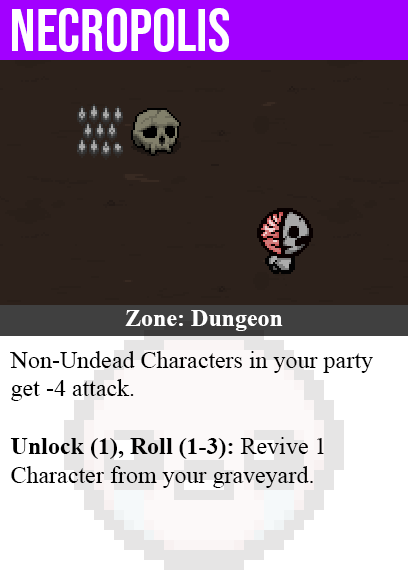
<style>
.page{position:relative;width:408px;height:585px;background:#2c211b}
.page>*{position:absolute;margin:0}
.t1{font:60px "BebasNeue-Regular";color:#ffffff}
.t2{font:24px "TimesNewRomanPS-BoldMT";color:#ffffff}
.t3{font:24px "TimesNewRomanPSMT";color:#000000}
.t4{font:24px "TimesNewRomanPS-BoldMT";color:#000000}
</style>
<div class="page">
<p class="t1" style="left:12px;top:8px;width:217px;height:44px">necropolis</p>
<p class="t2" style="left:125px;top:310px;width:158px;height:21px">Zone: Dungeon</p>
<p class="t3" style="left:10px;top:351px;width:363px;height:137px">Non-Undead Characters in your party<br>get -4 attack.<br><br><span class="t4">Unlock (1), Roll (1-3):</span> Revive 1<br>Character from your graveyard.</p>
</div>
